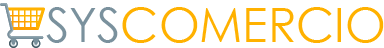
<style>
.page{position:relative;width:384px;height:48px;background:#ffffff}
.page>*{position:absolute;margin:0}
.t1{font:46.9px "CenturyGothic";color:#ffb100}
.t2{font:46.9px "CenturyGothic";color:#7a919d}
</style>
<div class="page">
<p class="t1" style="left:46px;top:7px;width:338px;height:36px"><span class="t2">SYS</span>COMERCIO</p>
</div>
